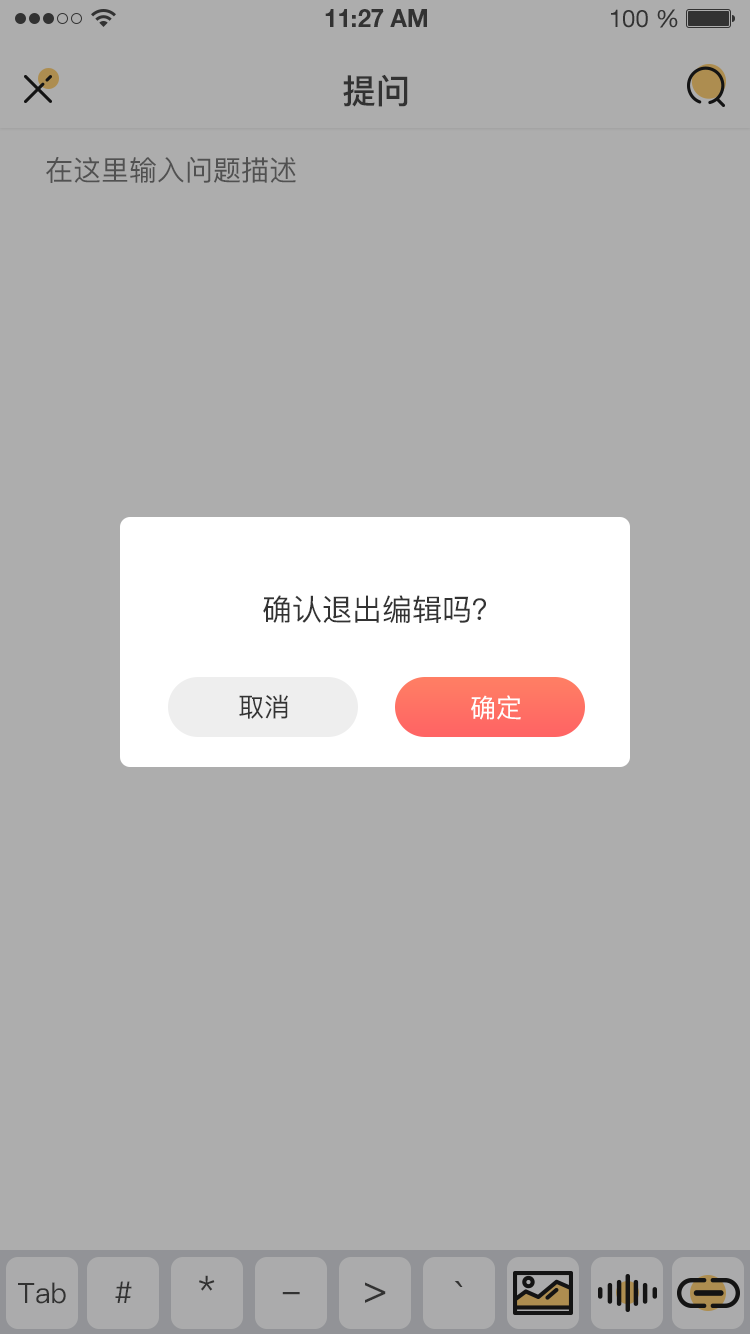
<style>
.page{position:relative;width:750px;height:1334px;background:#adadad}
.page>*{position:absolute;margin:0}
.t1{font:34px "PingFang-SC-Bold";color:#333333;text-transform:uppercase}
.t2{font:28px "PingFang-SC-Medium";color:#666666;text-transform:uppercase}
.t3{font:30px "PingFang-SC-Medium";color:#333333;text-transform:uppercase}
.t4{font:26px "PingFang-SC-Medium";color:#333333;text-transform:uppercase}
.t5{font:26px "PingFang-SC-Medium";color:#fffefe;text-transform:uppercase}
.t6{font:34px "PingFang-SC-Medium";color:#333333}
.t7{font:28px "PingFang-SC-Medium";color:#333333}
.t8{font:28px "PingFang-SC-Medium";color:#333333;text-transform:uppercase}
.t9{font:30px "PingFang-SC-Medium";color:#333333}
.t10{font:40px "PingFang-SC-Medium";color:#333333}
</style>
<div class="page">
<p class="t1" style="left:343px;top:74px;width:65px;height:33px">提问</p>
<p class="t2" style="left:46px;top:157px;width:250px;height:26px">在这里输入问题描述</p>
<p class="t3" style="left:263px;top:595px;width:223px;height:28px">确认退出编辑吗？</p>
<p class="t4" style="left:239px;top:694px;width:49px;height:25px">取消</p>
<p class="t5" style="left:471px;top:695px;width:50px;height:25px">确定</p>
<p class="t6" style="left:199px;top:1275px;width:16px;height:16px">*</p>
<p class="t7" style="left:18px;top:1282px;width:48px;height:22px"><span class="t8">T</span>ab</p>
<p class="t9" style="left:115px;top:1281px;width:17px;height:22px">#</p>
<p class="t10" style="left:365px;top:1282px;width:21px;height:21px">&gt;</p>
<p class="t10" style="left:454px;top:1281px;width:9px;height:6px">`</p>
<p class="t6" style="left:282px;top:1292px;width:18px;height:3px">-</p>
</div>
